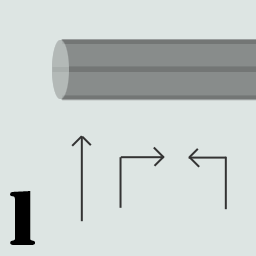
<style>
.page{position:relative;width:256px;height:256px;background:#dde5e3}
.page>*{position:absolute;margin:0}
.t1{font:72px "StencilStd";color:#000000}
</style>
<div class="page">
<p class="t1" style="left:10px;top:191px;width:25px;height:54px">1</p>
</div>
